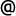
<style>
.page{position:relative;width:16px;height:16px;background:#ffffff}
.page>*{position:absolute;margin:0}
.t1{font:18px "Tahoma";color:#000000}
</style>
<div class="page">
<p class="t1" style="left:0px;top:0px;width:16px;height:16px">@</p>
</div>
